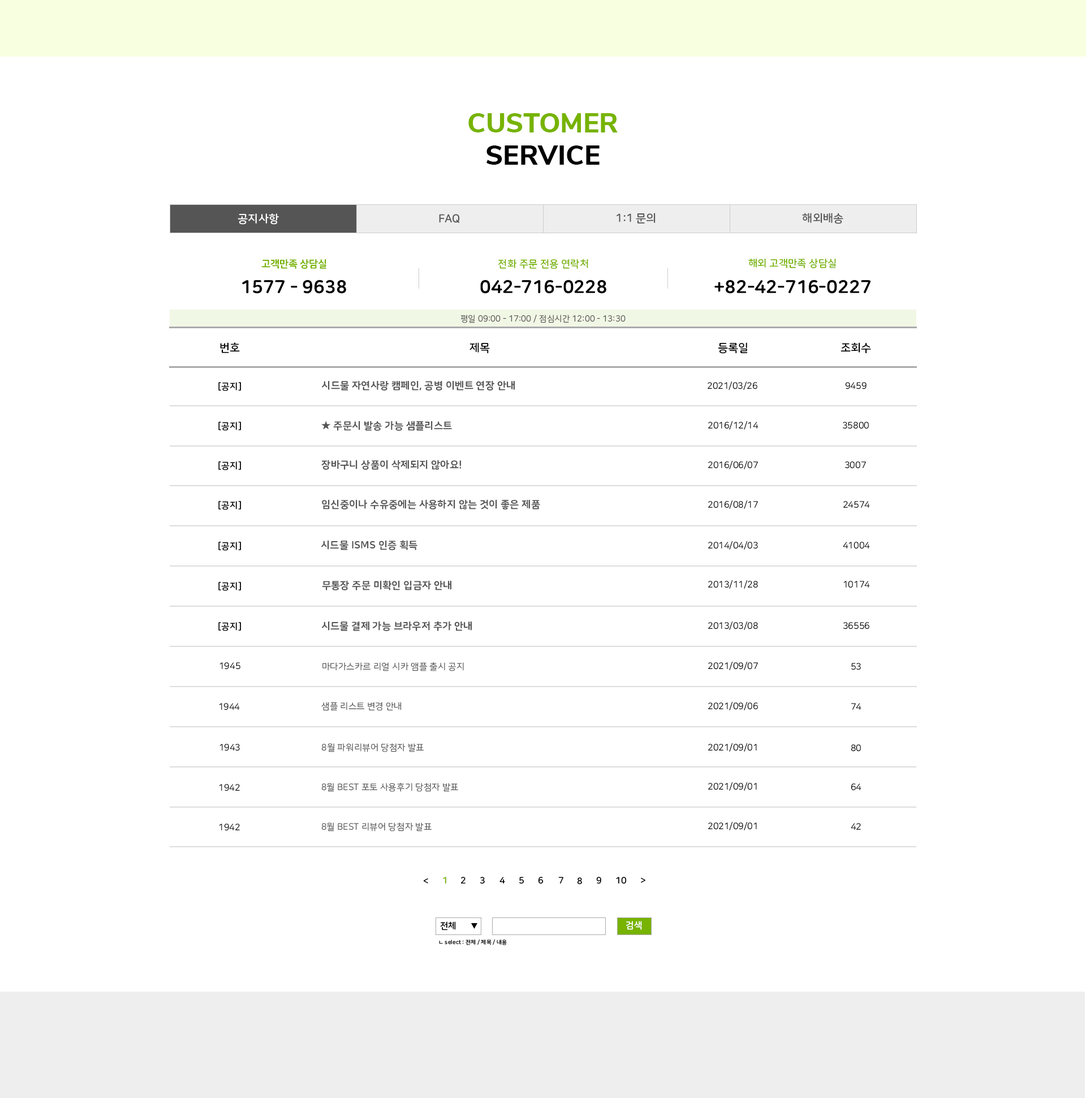
<style>
.page{position:relative;width:1086px;height:1098px;background:#ffffff}
.page>*{position:absolute;margin:0}
.t1{font:27.2px "NunitoSans-ExtraBold";color:#77b300}
.t2{font:27.2px "NunitoSans-ExtraBold";color:#000000}
.t3{font:11.3px "NanumSquareRoundOTFB";color:#ffffff}
.t4{font:11.3px "NanumSquareRoundOTFB";color:#555555}
.t5{font:10.2px "NanumSquareRoundOTFEB";letter-spacing:-0.025em;color:#77b300}
.t6{font:10.2px "NanumSquareRoundOTFB";color:#77b300}
.t7{font:18.1px "NanumSquareRoundOTFEB";color:#000000}
.t8{font:8.5px "NanumSquareRoundOTFR";color:#555555}
.t9{font:11.3px "NanumSquareRoundOTFB";color:#000000}
.t10{font:9.1px "NanumSquareRoundOTFB";color:#000000}
.t11{font:10.2px "NanumSquareRoundOTFEB";color:#555555}
.t12{font:9.1px "NanumSquareRoundOTFR";color:#000000}
.t13{font:9.1px "NanumSquareRoundOTFR";color:#555555}
.t14{font:9.1px "NanumSquareRoundOTFB";color:#77b300}
.t15{font:9.1px "NanumSquareRoundOTFB";color:#ffffff}
.t16{font:5.7px "NanumSquareRoundOTFB";color:#000000}
</style>
<div class="page">
<p class="t1" style="left:468px;top:113px;width:150px;height:52px;text-align:center">CUSTOMER<br><span class="t2">SERVICE</span></p>
<p class="t3" style="left:238px;top:213px;width:41px;height:12px">공지사항</p>
<p class="t4" style="left:439px;top:214px;width:21px;height:9px">FAQ</p>
<p class="t4" style="left:617px;top:213px;width:39px;height:10px">1:1 문의</p>
<p class="t4" style="left:802px;top:213px;width:42px;height:11px">해외배송</p>
<p class="t5" style="left:261px;top:259px;width:65px;height:10px">고객만족 상담실</p>
<p class="t6" style="left:498px;top:259px;width:90px;height:10px">전화 주문 전용 연락처</p>
<p class="t6" style="left:749px;top:259px;width:87px;height:9px">해외 고객만족 상담실</p>
<p class="t7" style="left:242px;top:280px;width:104px;height:14px">1577 - 9638</p>
<p class="t7" style="left:480px;top:280px;width:127px;height:14px">042-716-0228</p>
<p class="t7" style="left:715px;top:280px;width:156px;height:14px">+82-42-716-0227</p>
<p class="t8" style="left:461px;top:314px;width:165px;height:9px">평일 09:00 - 17:00 / 점심시간 12:00 - 13:30</p>
<p class="t9" style="left:220px;top:342px;width:20px;height:11px">번호</p>
<p class="t9" style="left:470px;top:342px;width:20px;height:12px">제목</p>
<p class="t9" style="left:718px;top:342px;width:30px;height:12px">등록일</p>
<p class="t9" style="left:841px;top:342px;width:30px;height:12px">조회수</p>
<p class="t10" style="left:218px;top:382px;width:23px;height:9px">[공지]</p>
<p class="t11" style="left:322px;top:381px;width:193px;height:9px">시드물 자연사랑 캠페인, 공병 이벤트 연장 안내</p>
<p class="t12" style="left:708px;top:381px;width:50px;height:9px">2021/03/26</p>
<p class="t12" style="left:845px;top:382px;width:22px;height:7px">9459</p>
<p class="t10" style="left:218px;top:422px;width:23px;height:9px">[공지]</p>
<p class="t11" style="left:321px;top:420px;width:131px;height:11px">★ 주문시 발송 가능 샘플리스트</p>
<p class="t12" style="left:708px;top:421px;width:51px;height:9px">2016/12/14</p>
<p class="t12" style="left:843px;top:422px;width:26px;height:7px">35800</p>
<p class="t10" style="left:218px;top:461px;width:23px;height:9px">[공지]</p>
<p class="t11" style="left:321px;top:460px;width:141px;height:10px">장바구니 상품이 삭제되지 않아요!</p>
<p class="t12" style="left:708px;top:461px;width:50px;height:9px">2016/06/07</p>
<p class="t12" style="left:845px;top:461px;width:21px;height:7px">3007</p>
<p class="t10" style="left:218px;top:501px;width:23px;height:9px">[공지]</p>
<p class="t11" style="left:322px;top:499px;width:218px;height:11px">임신중이나 수유중에는 사용하지 않는 것이 좋은 제품</p>
<p class="t12" style="left:708px;top:500px;width:50px;height:9px">2016/08/17</p>
<p class="t12" style="left:844px;top:501px;width:26px;height:7px">24574</p>
<p class="t10" style="left:218px;top:541px;width:23px;height:10px">[공지]</p>
<p class="t11" style="left:321px;top:540px;width:97px;height:10px">시드물 ISMS 인증 획득</p>
<p class="t12" style="left:708px;top:541px;width:50px;height:9px">2014/04/03</p>
<p class="t12" style="left:843px;top:541px;width:27px;height:8px">41004</p>
<p class="t10" style="left:218px;top:582px;width:23px;height:9px">[공지]</p>
<p class="t11" style="left:322px;top:580px;width:130px;height:10px">무통장 주문 미확인 입금자 안내</p>
<p class="t12" style="left:708px;top:580px;width:50px;height:9px">2013/11/28</p>
<p class="t12" style="left:844px;top:581px;width:26px;height:7px">10174</p>
<p class="t10" style="left:218px;top:622px;width:23px;height:9px">[공지]</p>
<p class="t11" style="left:322px;top:621px;width:150px;height:10px">시드물 결제 가능 브라우저 추가 안내</p>
<p class="t12" style="left:708px;top:621px;width:50px;height:9px">2013/03/08</p>
<p class="t12" style="left:844px;top:622px;width:26px;height:7px">36556</p>
<p class="t12" style="left:220px;top:662px;width:20px;height:7px">1945</p>
<p class="t13" style="left:323px;top:662px;width:141px;height:9px">마다가스카르 리얼 시카 앰플 출시 공지</p>
<p class="t12" style="left:708px;top:661px;width:50px;height:9px">2021/09/07</p>
<p class="t12" style="left:852px;top:663px;width:9px;height:7px">53</p>
<p class="t13" style="left:321px;top:702px;width:81px;height:9px">샘플 리스트 변경 안내</p>
<p class="t12" style="left:708px;top:702px;width:50px;height:9px">2021/09/06</p>
<p class="t12" style="left:219px;top:703px;width:21px;height:7px">1944</p>
<p class="t12" style="left:851px;top:703px;width:11px;height:7px">74</p>
<p class="t12" style="left:220px;top:743px;width:20px;height:8px">1943</p>
<p class="t13" style="left:321px;top:743px;width:103px;height:9px">8월 파워리뷰어 당첨자 발표</p>
<p class="t12" style="left:708px;top:743px;width:49px;height:9px">2021/09/01</p>
<p class="t12" style="left:851px;top:744px;width:10px;height:7px">80</p>
<p class="t12" style="left:219px;top:784px;width:21px;height:7px">1942</p>
<p class="t13" style="left:321px;top:783px;width:137px;height:9px">8월 BEST 포토 사용후기 당첨자 발표</p>
<p class="t12" style="left:708px;top:782px;width:49px;height:9px">2021/09/01</p>
<p class="t12" style="left:852px;top:783px;width:10px;height:7px">64</p>
<p class="t12" style="left:708px;top:822px;width:49px;height:9px">2021/09/01</p>
<p class="t12" style="left:219px;top:823px;width:21px;height:8px">1942</p>
<p class="t13" style="left:321px;top:822px;width:111px;height:9px">8월 BEST 리뷰어 당첨자 발표</p>
<p class="t12" style="left:851px;top:823px;width:10px;height:7px">42</p>
<p class="t10" style="left:423px;top:878px;width:5px;height:5px">&lt;</p>
<p class="t14" style="left:443px;top:876px;width:3px;height:8px">1</p>
<p class="t10" style="left:461px;top:876px;width:5px;height:7px">2</p>
<p class="t10" style="left:480px;top:876px;width:5px;height:8px">3</p>
<p class="t10" style="left:500px;top:876px;width:5px;height:8px">4</p>
<p class="t10" style="left:519px;top:876px;width:5px;height:8px">5</p>
<p class="t10" style="left:538px;top:876px;width:6px;height:8px">6</p>
<p class="t10" style="left:558px;top:876px;width:6px;height:8px">7</p>
<p class="t10" style="left:577px;top:877px;width:5px;height:7px">8</p>
<p class="t10" style="left:596px;top:876px;width:5px;height:8px">9</p>
<p class="t10" style="left:616px;top:876px;width:11px;height:8px">10</p>
<p class="t10" style="left:641px;top:877px;width:5px;height:6px">&gt;</p>
<p class="t10" style="left:440px;top:921px;width:16px;height:9px">전체</p>
<p class="t15" style="left:626px;top:921px;width:16px;height:9px">검색</p>
<p class="t16" style="left:439px;top:939px;width:68px;height:6px">ㄴ select : 전체 / 제목 / 내용</p>
</div>
